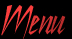
<style>
.page{position:relative;width:72px;height:39px;background:#000000}
.page>*{position:absolute;margin:0}
.t1{font:37.9px "StillTime-Regular";color:#fa3e3d}
.t2{font:37.9px "StillTime-Regular";color:#e43837}
.t3{font:37.9px "StillTime-Regular";color:#d03333}
.t4{font:37.9px "StillTime-Regular";color:#ba2d2c}
</style>
<div class="page">
<p class="t1" style="left:1px;top:5px;width:65px;height:36px">M<span class="t2">e</span><span class="t3">n</span><span class="t4">u</span></p>
</div>
